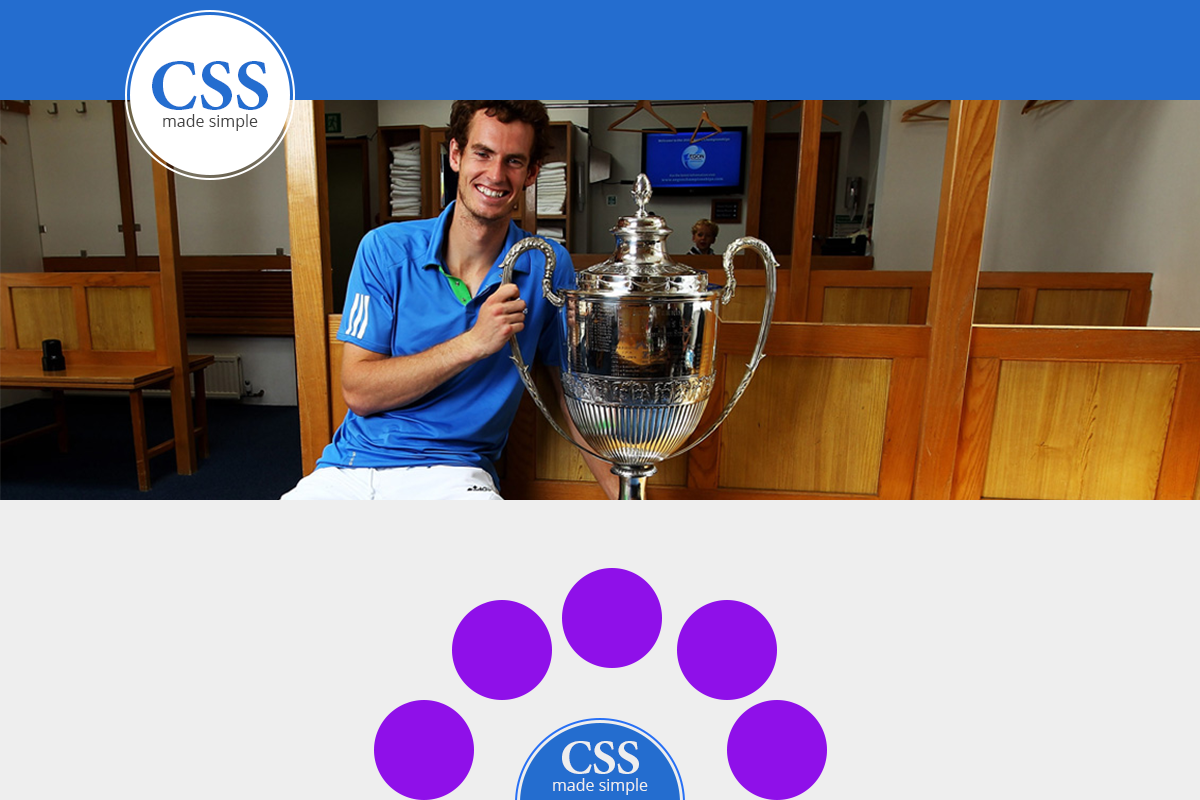
<style>
.page{position:relative;width:1200px;height:800px;background:#eeeeee}
.page>*{position:absolute;margin:0}
.t1{font:72px "MinionPro-Bold";color:#246dcf}
.t2{font:16px "OpenSans";color:#444444}
.t3{font:48px "MinionPro-Bold";color:#eeeeee}
.t4{font:16px "OpenSans";color:#eeeeee}
</style>
<div class="page">
<p class="t1" style="left:152px;top:61px;width:116px;height:49px">CSS</p>
<p class="t2" style="left:163px;top:114px;width:95px;height:17px">made simple</p>
<p class="t3" style="left:562px;top:741px;width:77px;height:33px">CSS</p>
<p class="t4" style="left:553px;top:778px;width:95px;height:17px">made simple</p>
</div>
